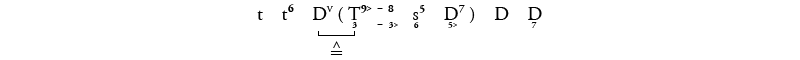
<style>
.page{position:relative;width:800px;height:60px;background:#ffffff}
.page>*{position:absolute;margin:0}
.t1{font:18.7px "Analysia";color:#000000}
.t2{font:18.7px "LucidaSansUnicode";color:#000000}
</style>
<div class="page">
<p class="t1" style="left:257px;top:4px;width:285px;height:24px">t tÎª Dî ( óTÑ êª ˜™ª Ðòúª ösÍª õûDÏª ) D ùD</p>
<p class="t2" style="left:330px;top:41px;width:13px;height:14px">≙</p>
</div>
